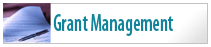
<style>
.page{position:relative;width:211px;height:47px;background:#ffffff}
.page>*{position:absolute;margin:0}
.t1{font:24px "MyriadPro-SemiboldCond";color:#11839a;scale:0.78 1}
</style>
<div class="page">
<p class="t1" style="left:53px;top:14px;width:120px;height:22px">Grant Management</p>
</div>
